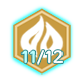
<style>
.page{position:relative;width:83px;height:83px;background:#ffffff}
.page>*{position:absolute;margin:0}
.t1{font:15.7px "MaokenZhuyuanTi-Regular";color:#ffffff;font-weight:bold;scale:0.95 1}
.t2{font:15.7px "MaokenZhuyuanTi-Regular";color:#bafffe;font-weight:bold;scale:0.95 1}
</style>
<div class="page">
<p class="t1" style="left:21px;top:50px;width:42px;height:15px"><span class="t2">11</span>/12</p>
</div>
